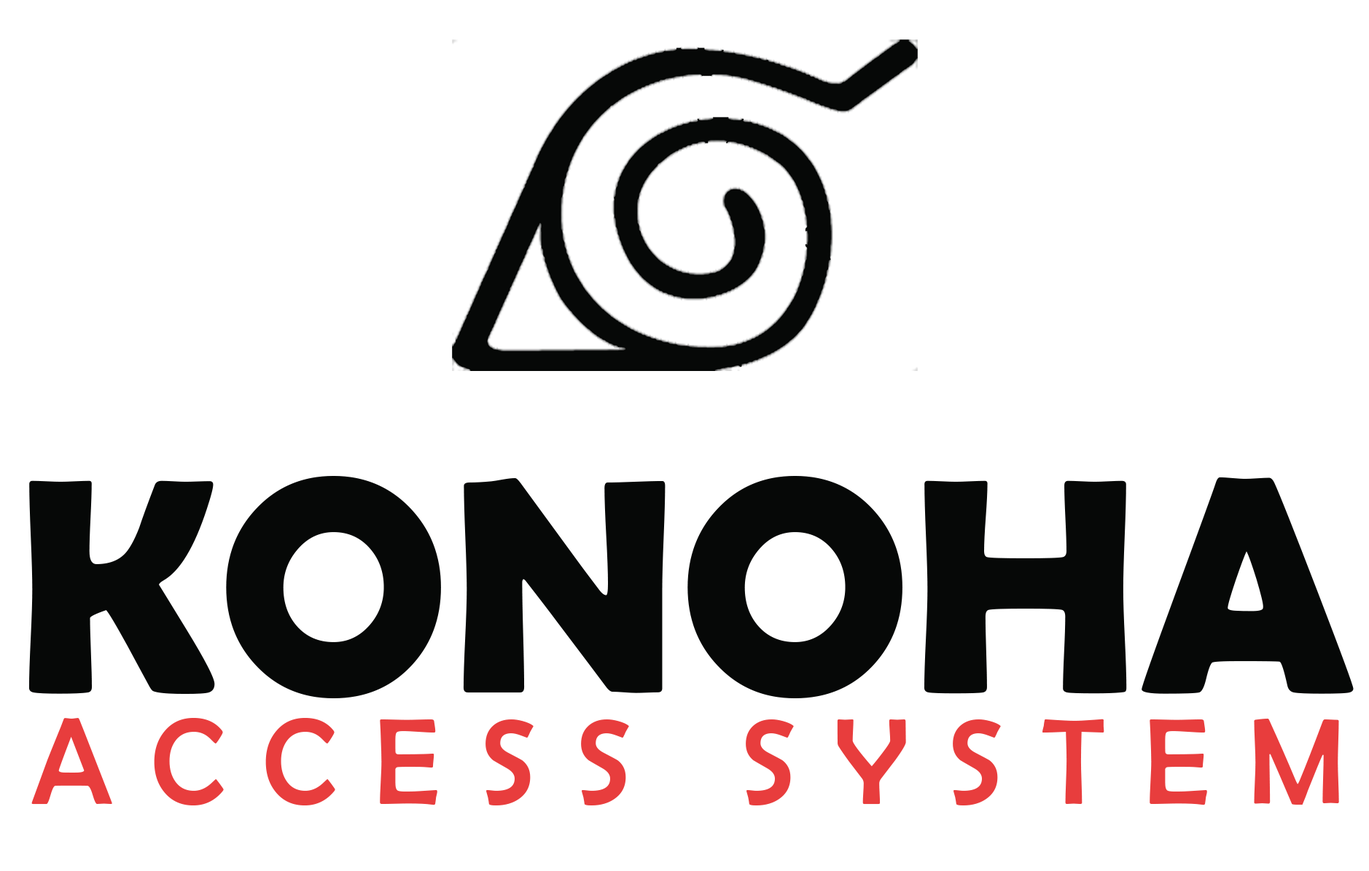
<style>
.page{position:relative;width:1369px;height:871px;background:#ffffff}
.page>*{position:absolute;margin:0}
.t1{font:308.5px "BerlinSansFBDemi-Bold";color:#060807}
.t2{font:123.4px "BerlinSansFB-Reg";letter-spacing:0.31em;color:#e83d3d}
</style>
<div class="page">
<p class="t1" style="left:28px;top:476px;width:1326px;height:222px">KONOHA</p>
<p class="t2" style="left:31px;top:718px;width:1308px;height:87px">ACCESS SYSTEM</p>
</div>
